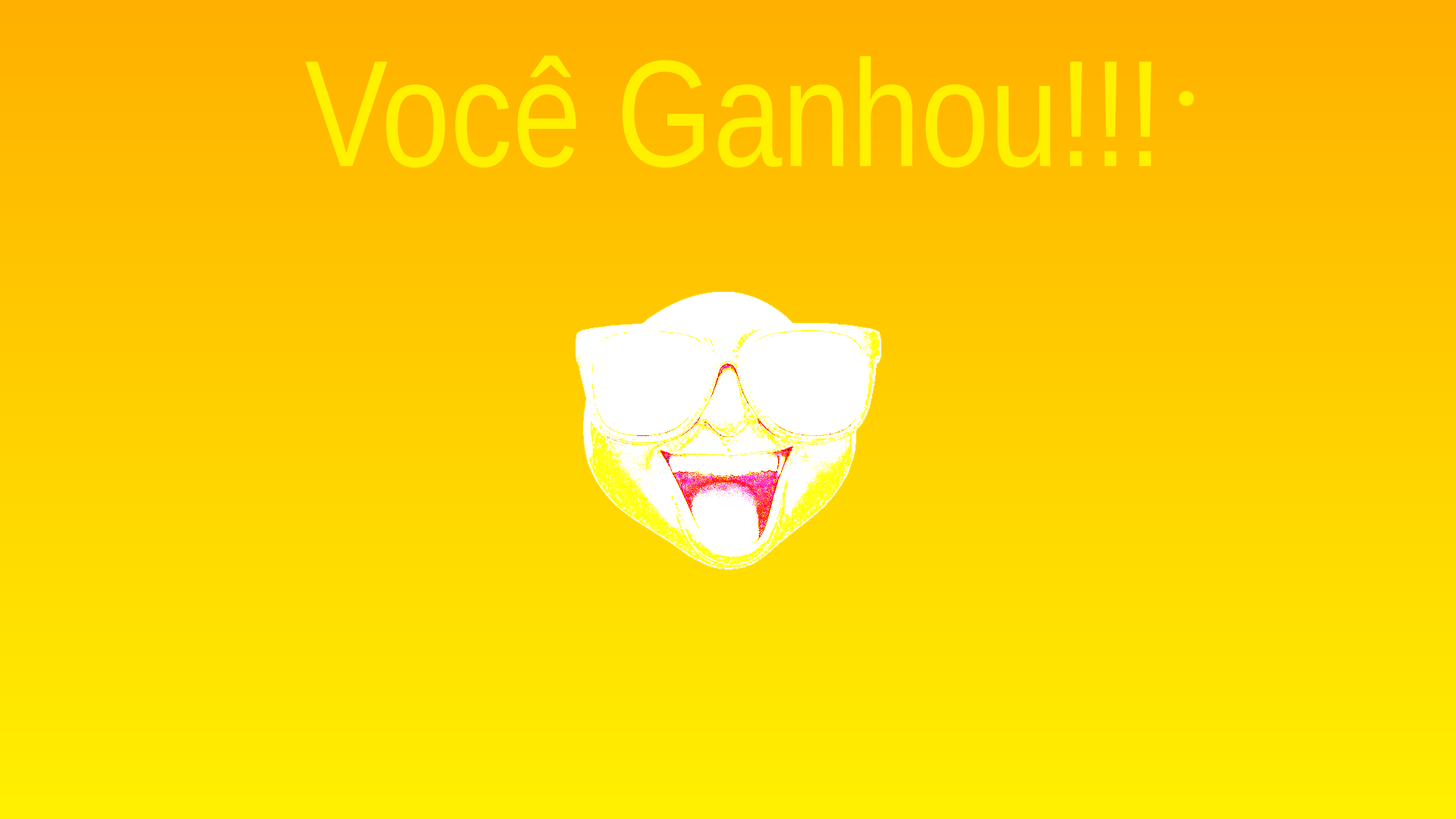
<style>
.page{position:relative;width:1456px;height:819px}
.page>*{position:absolute;margin:0}
.t1{font:151.7px "LiberationSansNarrow";color:#fff000}
</style>
<div class="page">
<p class="t1" style="left:304px;top:55px;width:849px;height:113px">Você Ganhou!!!</p>
</div>
